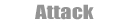
<style>
.page{position:relative;width:128px;height:24px;background:#ffffff}
.page>*{position:absolute;margin:0}
.t1{font:18px "Impact";color:#959494;scale:1.25 1}
</style>
<div class="page">
<p class="t1" style="left:35px;top:4px;width:59px;height:16px">Attack</p>
</div>
